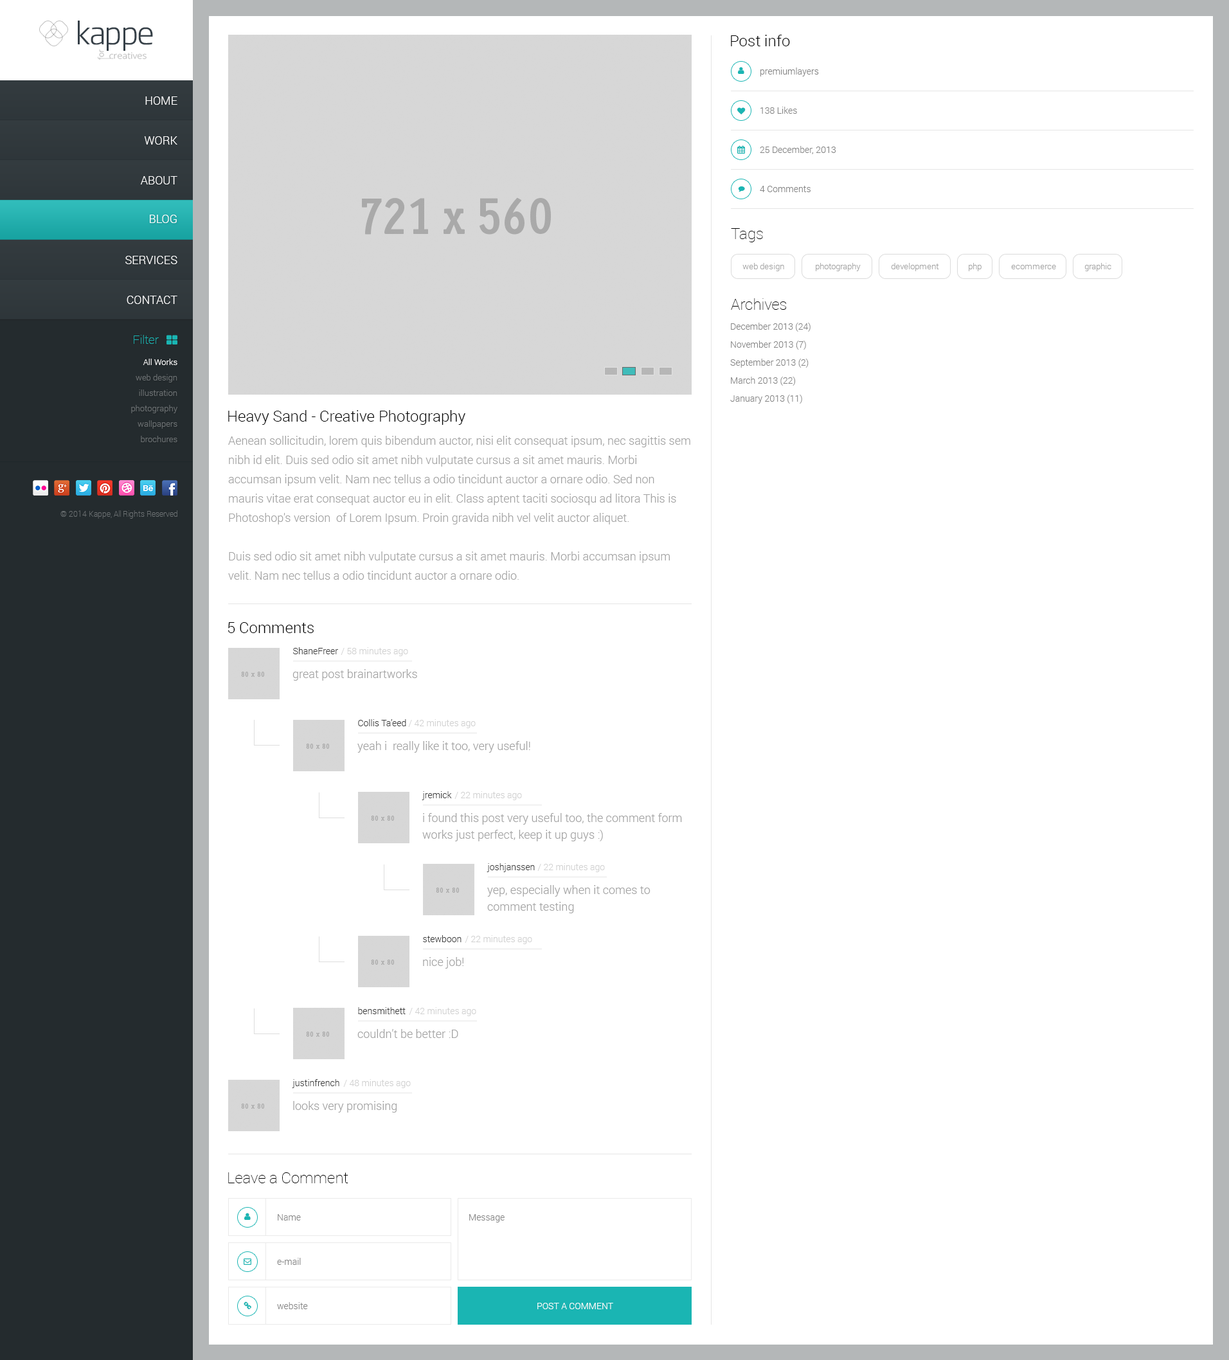
<style>
.page{position:relative;width:1229px;height:1360px;background:#ffffff}
.page>*{position:absolute;margin:0}
.t1{font:30.6px "SohoGothicPro-Light";letter-spacing:-0.04em;color:#364048}
.t2{font:15.4px "Roboto-Light";color:#000000}
.t3{font:9px "Roboto-Light";color:#848484}
.t4{font:11.6px "Roboto-Light";color:#ffffff;text-transform:uppercase}
.t5{font:15.4px "Roboto-Thin";color:#000000}
.t6{font:8.4px "Roboto-Light";color:#a3a3a3}
.t7{font:9px/18px "Roboto-Light";color:#848484}
.t8{font:12.2px "Roboto-Thin";color:#1ab5b3}
.t9{font:8.4px/15.4px "Roboto-Light";color:#6b7072}
.t10{font:8.4px/15.4px "Roboto-Light";color:#ffffff}
.t11{font:11.6px/19.3px "Roboto-Light";color:#a3a3a3}
.t12{font:7.7px "Roboto-Thin";color:#6b7072}
.t13{font:9px "Roboto-Light";color:#3c3c3c}
.t14{font:9px "Roboto-Light";color:#d1d1d1}
.t15{font:11.6px "Roboto-Light";color:#a3a3a3}
.t16{font:11.6px/16.7px "Roboto-Light";color:#a3a3a3}
.t17{font:9px "Roboto-Light";color:#ffffff;text-transform:uppercase}
</style>
<div class="page">
<p class="t1" style="left:78px;top:21px;width:75px;height:30px">kappe</p>
<p class="t2" style="left:731px;top:35px;width:59px;height:11px">Post info</p>
<p class="t3" style="left:760px;top:68px;width:59px;height:8px">premiumlayers</p>
<p class="t4" style="left:145px;top:96px;width:32px;height:9px">Home</p>
<p class="t3" style="left:760px;top:107px;width:37px;height:7px">138 Likes</p>
<p class="t4" style="left:144px;top:136px;width:33px;height:9px">Work</p>
<p class="t3" style="left:760px;top:146px;width:76px;height:8px">25 December, 2013</p>
<p class="t4" style="left:140px;top:176px;width:37px;height:8px">About</p>
<p class="t3" style="left:760px;top:186px;width:51px;height:6px">4 Comments</p>
<p class="t4" style="left:150px;top:215px;width:27px;height:8px">Blog</p>
<p class="t5" style="left:731px;top:228px;width:32px;height:14px">Tags</p>
<p class="t4" style="left:125px;top:256px;width:52px;height:8px">Services</p>
<p class="t6" style="left:742px;top:263px;width:42px;height:8px">web design</p>
<p class="t6" style="left:816px;top:263px;width:45px;height:8px">photography</p>
<p class="t6" style="left:891px;top:263px;width:48px;height:8px">development</p>
<p class="t6" style="left:969px;top:263px;width:13px;height:8px">php</p>
<p class="t6" style="left:1011px;top:265px;width:45px;height:4px">ecommerce</p>
<p class="t6" style="left:1084px;top:263px;width:28px;height:8px">graphic</p>
<p class="t4" style="left:127px;top:296px;width:50px;height:8px">Contact</p>
<p class="t5" style="left:731px;top:298px;width:55px;height:12px">Archives</p>
<p class="t7" style="left:730px;top:323px;width:81px;height:81px">December 2013 (24)<br>November 2013 (7)<br>September 2013 (2)<br>March 2013 (22)<br>January 2013 (11)</p>
<p class="t8" style="left:134px;top:335px;width:25px;height:9px">Filter</p>
<p class="t9" style="left:131px;top:359px;width:46px;height:83px;text-align:right"><span class="t10">All Works<br></span>web design<br>illustration<br>photography<br>wallpapers<br>brochures</p>
<p class="t2" style="left:228px;top:410px;width:237px;height:15px">Heavy Sand - Creative Photography</p>
<p class="t11" style="left:228px;top:436px;width:462px;height:144px">Aenean sollicitudin, lorem quis bibendum auctor, nisi elit consequat ipsum, nec sagittis sem nibh id elit. Duis sed odio sit amet nibh vulputate cursus a sit amet mauris. Morbi accumsan ipsum velit. Nam nec tellus a odio tincidunt auctor a ornare odio. Sed non  mauris vitae erat consequat auctor eu in elit. Class aptent taciti sociosqu ad litora This is Photoshop's version  of Lorem Ipsum. Proin gravida nibh vel velit auctor aliquet.<br><br>Duis sed odio sit amet nibh vulputate cursus a sit amet mauris. Morbi accumsan ipsum velit. Nam nec tellus a odio tincidunt auctor a ornare odio.</p>
<p class="t12" style="left:60px;top:510px;width:117px;height:9px">© 2014 Kappe, All Rights Reserved</p>
<p class="t2" style="left:228px;top:622px;width:86px;height:11px">5 Comments</p>
<p class="t13" style="left:293px;top:647px;width:45px;height:7px">ShaneFreer</p>
<p class="t14" style="left:341px;top:647px;width:67px;height:9px">/ 58 minutes ago</p>
<p class="t15" style="left:292px;top:669px;width:125px;height:12px">great post brainartworks</p>
<p class="t13" style="left:358px;top:719px;width:48px;height:7px">Collis Ta’eed</p>
<p class="t14" style="left:408px;top:719px;width:68px;height:9px">/ 42 minutes ago</p>
<p class="t15" style="left:357px;top:741px;width:173px;height:12px">yeah i  really like it too, very useful!</p>
<p class="t13" style="left:422px;top:791px;width:30px;height:9px">jremick</p>
<p class="t14" style="left:455px;top:791px;width:67px;height:9px">/ 22 minutes ago</p>
<p class="t16" style="left:422px;top:813px;width:260px;height:29px">i found this post very useful too, the comment form<br>works just perfect, keep it up guys :)</p>
<p class="t13" style="left:487px;top:863px;width:48px;height:9px">joshjanssen</p>
<p class="t14" style="left:537px;top:863px;width:68px;height:9px">/ 22 minutes ago</p>
<p class="t16" style="left:487px;top:885px;width:164px;height:29px">yep, especially when it comes to <br>comment testing</p>
<p class="t13" style="left:423px;top:935px;width:39px;height:7px">stewboon</p>
<p class="t14" style="left:465px;top:935px;width:67px;height:9px">/ 22 minutes ago</p>
<p class="t15" style="left:423px;top:957px;width:41px;height:12px">nice job!</p>
<p class="t13" style="left:358px;top:1007px;width:48px;height:7px">bensmithett</p>
<p class="t14" style="left:409px;top:1007px;width:67px;height:9px">/ 42 minutes ago</p>
<p class="t15" style="left:357px;top:1029px;width:101px;height:9px">couldn’t be better :D</p>
<p class="t13" style="left:292px;top:1079px;width:47px;height:9px">justinfrench</p>
<p class="t14" style="left:343px;top:1079px;width:68px;height:9px">/ 48 minutes ago</p>
<p class="t15" style="left:293px;top:1101px;width:104px;height:12px">looks very promising</p>
<p class="t5" style="left:228px;top:1173px;width:120px;height:11px">Leave a Comment</p>
<p class="t3" style="left:278px;top:1214px;width:23px;height:7px">Name</p>
<p class="t3" style="left:469px;top:1214px;width:36px;height:9px">Message</p>
<p class="t3" style="left:277px;top:1258px;width:24px;height:7px">e-mail</p>
<p class="t3" style="left:277px;top:1302px;width:31px;height:8px">website</p>
<p class="t17" style="left:537px;top:1303px;width:76px;height:7px">Post a Comment</p>
</div>
